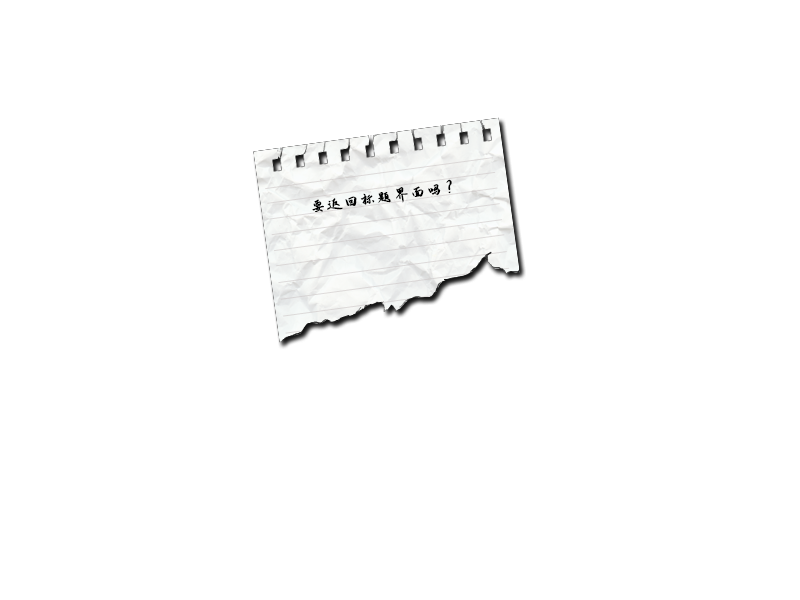
<style>
.page{position:relative;width:800px;height:600px;background:#ffffff}
.page>*{position:absolute;margin:0}
.t1{font:18.8px "slideyouran-Regular";color:#000000}
</style>
<div class="page">
<p class="t1" style="left:312px;top:179px;width:140px;height:33px;rotate:-8deg">要返回标题界面吗?</p>
</div>
